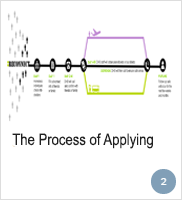
<style>
.page{position:relative;width:182px;height:200px;background:#ffffff}
.page>*{position:absolute;margin:0}
.t1{font:16px "ArialNarrow";color:#202020}
</style>
<div class="page">
<p class="t1" style="left:12px;top:133px;width:141px;height:16px">The Process of Applying</p>
</div>
